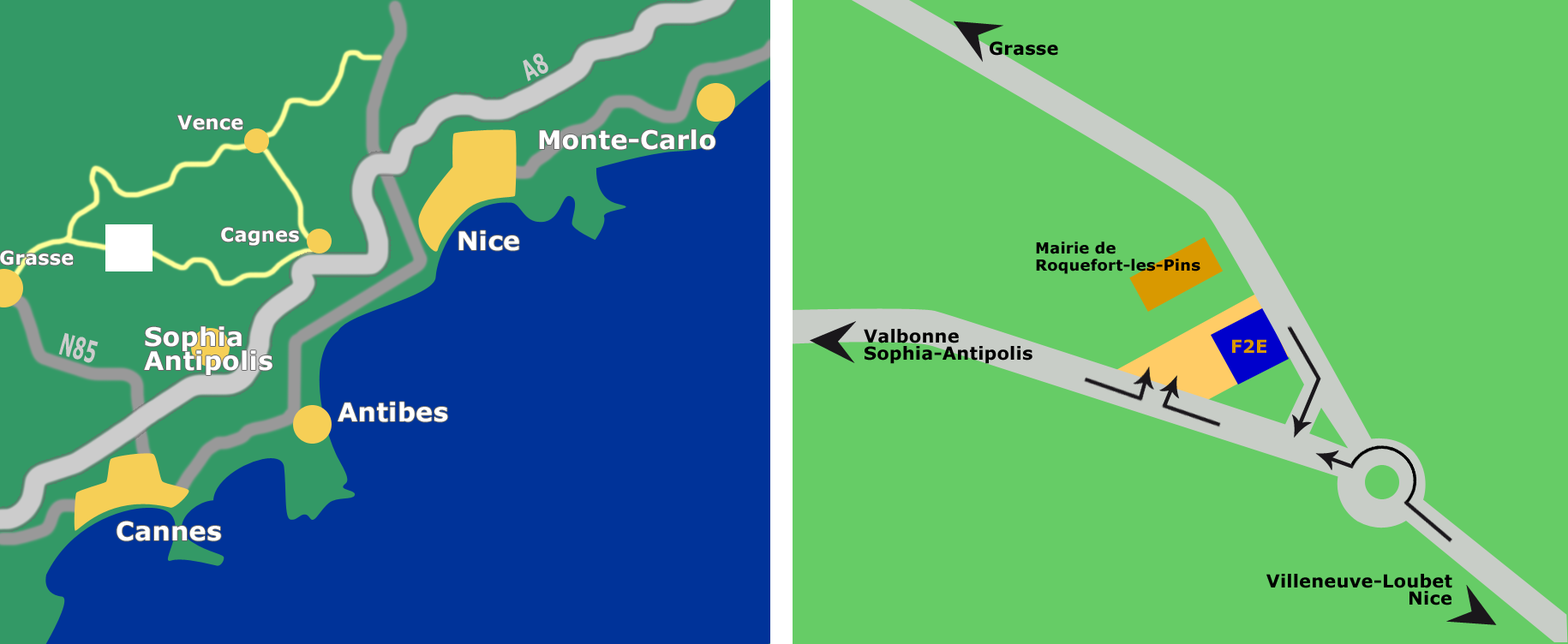
<style>
.page{position:relative;width:1568px;height:644px;background:#66cc66}
.page>*{position:absolute;margin:0}
.t1{font:18px "Verdana-Bold";letter-spacing:0.01em;color:#000000}
.t2{font:28px "Verdana-Bold";letter-spacing:0.01em;color:#cccccc;scale:0.61 1}
.t3{font:19.3px "Verdana-Bold";letter-spacing:0.01em;color:#ffffff}
.t4{font:25.7px "Verdana-Bold";letter-spacing:0.01em;color:#ffffff}
.t5{font:15.4px/17.1px "Verdana-Bold";letter-spacing:0.01em;color:#000000}
.t6{font:25.7px/24px "Verdana-Bold";letter-spacing:0.01em;color:#ffffff}
.t7{font:18px/17.1px "Verdana-Bold";letter-spacing:0.01em;color:#000000}
.t8{font:30.2px "Verdana-Bold";letter-spacing:0.01em;color:#cccccc;scale:0.54 1}
.t9{font:18px "Verdana-Bold";letter-spacing:0.01em;color:#d99900}
</style>
<div class="page">
<p class="t1" style="left:990px;top:41px;width:68px;height:15px">Grasse</p>
<p class="t2" style="left:523px;top:53px;width:25px;height:28px;rotate:-27deg">A8</p>
<p class="t3" style="left:177px;top:115px;width:66px;height:15px">Vence</p>
<p class="t4" style="left:539px;top:129px;width:176px;height:21px">Monte-Carlo</p>
<p class="t3" style="left:221px;top:227px;width:78px;height:19px">Cagnes</p>
<p class="t4" style="left:458px;top:230px;width:61px;height:21px">Nice</p>
<p class="t5" style="left:1036px;top:242px;width:164px;height:32px">Mairie de<br>Roquefort-les-Pins</p>
<p class="t3" style="left:0px;top:250px;width:74px;height:16px">Grasse</p>
<p class="t6" style="left:144px;top:326px;width:128px;height:49px">Sophia<br>Antipolis</p>
<p class="t7" style="left:864px;top:329px;width:168px;height:35px">Valbonne<br>Sophia-Antipolis</p>
<p class="t8" style="left:58px;top:332px;width:41px;height:31px;rotate:16deg">N85</p>
<p class="t9" style="left:1232px;top:339px;width:34px;height:14px">F2E</p>
<p class="t4" style="left:338px;top:402px;width:110px;height:20px">Antibes</p>
<p class="t4" style="left:117px;top:521px;width:104px;height:21px">Cannes</p>
<p class="t7" style="left:1266px;top:574px;width:186px;height:32px;text-align:right">Villeneuve-Loubet<br>Nice</p>
</div>
